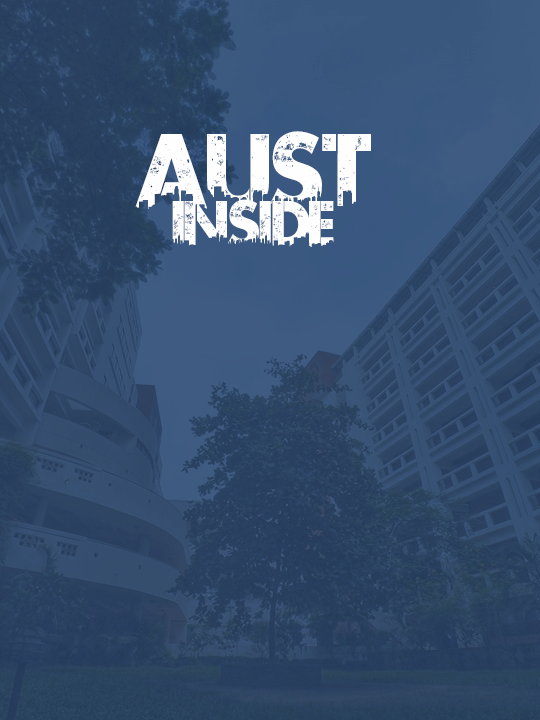
<style>
.page{position:relative;width:540px;height:720px}
.page>*{position:absolute;margin:0}
.t1{font:100px "UrbanJungleDEMO";color:#fefefe}
.t2{font:60px "UrbanJungleDEMO";color:#fefefe}
</style>
<div class="page">
<p class="t1" style="left:135px;top:131px;width:236px;height:78px">Aust</p>
<p class="t2" style="left:172px;top:199px;width:162px;height:48px">inside</p>
</div>
